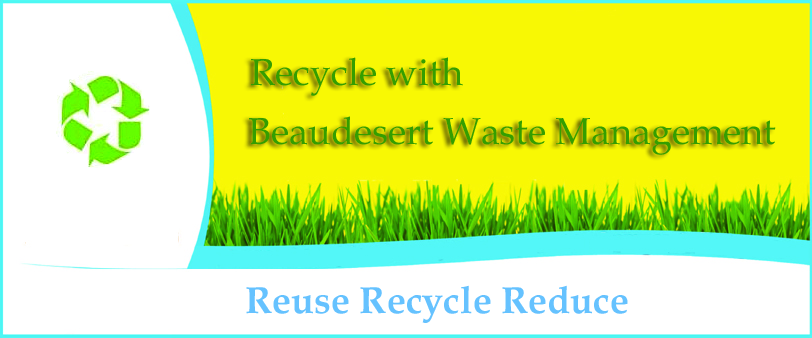
<style>
.page{position:relative;width:812px;height:338px;background:#ffffff}
.page>*{position:absolute;margin:0}
.t1{font:37.8px "BookAntiqua";color:#349e00}
.t2{font:37.8px "BookAntiqua-Bold";color:#65c2ff}
</style>
<div class="page">
<p class="t1" style="left:251px;top:57px;width:212px;height:39px">Recycle with</p>
<p class="t1" style="left:249px;top:116px;width:527px;height:39px">Beaudesert Waste Management</p>
<p class="t2" style="left:246px;top:285px;width:382px;height:38px">Reuse Recycle Reduce</p>
</div>
